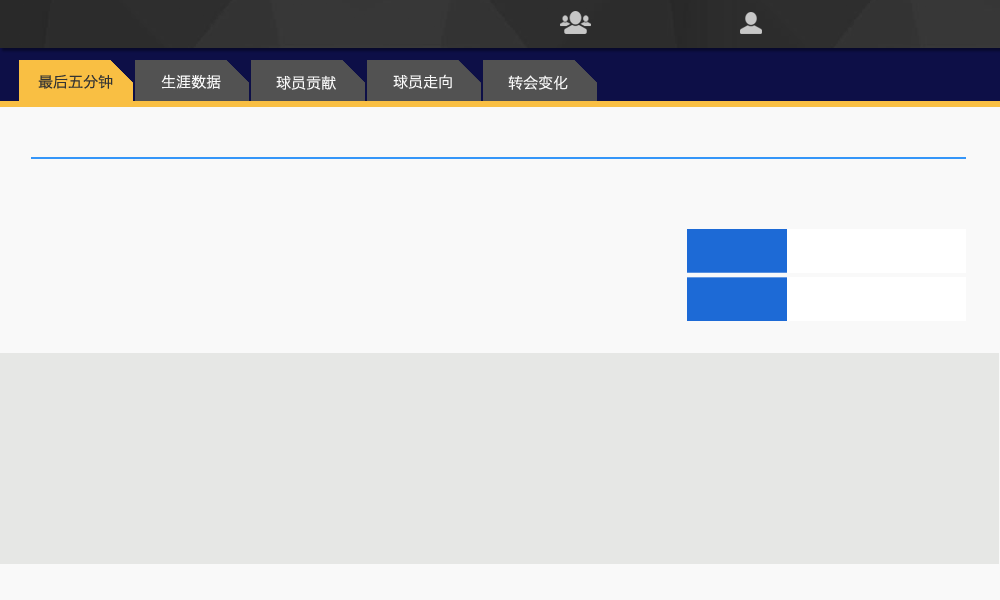
<style>
.page{position:relative;width:1000px;height:600px;background:#f9f9f9}
.page>*{position:absolute;margin:0}
.t1{font:15px "HiraginoSansGB-W3";color:#333333}
.t2{font:15px "HiraginoSansGB-W3";color:#f9f9f9}
</style>
<div class="page">
<p class="t1" style="left:38px;top:74px;width:75px;height:15px">最后五分钟</p>
<p class="t2" style="left:161px;top:74px;width:60px;height:15px">生涯数据</p>
<p class="t2" style="left:276px;top:75px;width:60px;height:15px">球员贡献</p>
<p class="t2" style="left:393px;top:74px;width:59px;height:15px">球员走向</p>
<p class="t2" style="left:508px;top:75px;width:60px;height:15px">转会变化</p>
</div>
